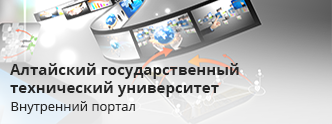
<style>
.page{position:relative;width:332px;height:124px}
.page>*{position:absolute;margin:0}
.t1{font:15px "OpenSans-Bold";color:#262626}
.t2{font:13px "OpenSans";color:#262626}
</style>
<div class="page">
<p class="t1" style="left:10px;top:63px;width:229px;height:34px">Алтайский государственный <br>технический университет</p>
<p class="t2" style="left:11px;top:101px;width:124px;height:13px">Внутренний портал</p>
</div>
